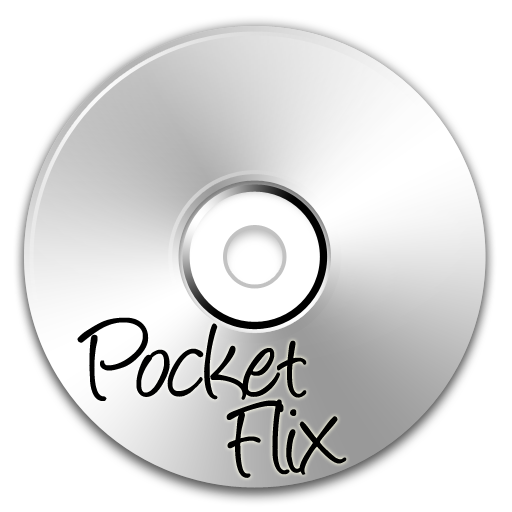
<style>
.page{position:relative;width:512px;height:512px;background:#ffffff}
.page>*{position:absolute;margin:0}
.t1{font:121px "Angelina";letter-spacing:-0.025em;color:#000000}
</style>
<div class="page">
<p class="t1" style="left:77px;top:317px;width:230px;height:84px">Pocket</p>
<p class="t1" style="left:226px;top:399px;width:121px;height:79px">Flix</p>
</div>
